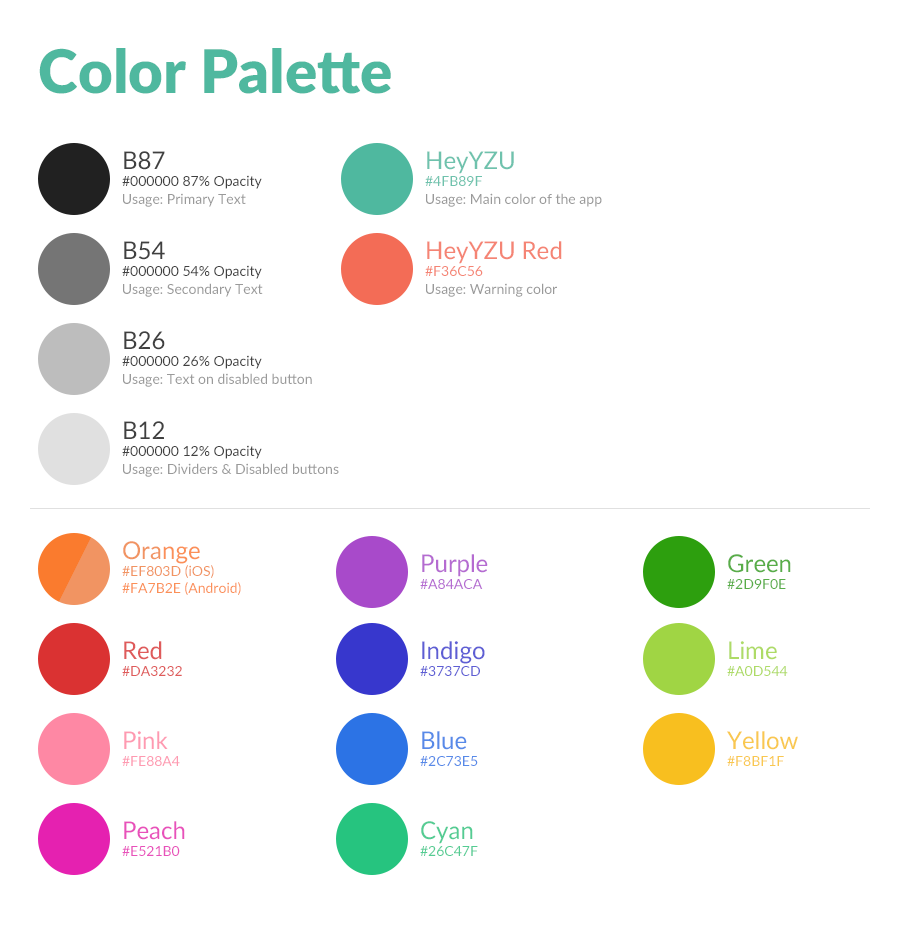
<style>
.page{position:relative;width:900px;height:940px;background:#ffffff}
.page>*{position:absolute;margin:0}
.t1{font:60px "Lato-Black";color:#4fb89f}
.t2{font:14px "Lato-Regular";color:#404040}
.t3{font:24px "Lato-Regular";color:#404040}
.t4{font:14px "Lato-Regular";color:#6fc2ad}
.t5{font:24px "Lato-Regular";color:#6fc2ad}
.t6{font:14px "Lato-Regular";color:#9a9a9a}
.t7{font:24px "Lato-Regular";color:#f58474}
.t8{font:14px "Lato-Regular";color:#f58474}
.t9{font:14px "Lato-Regular";color:#fb9058}
.t10{font:24px "Lato-Regular";color:#fb9058}
.t11{font:14px "Lato-Regular";color:#b56bd1}
.t12{font:24px "Lato-Regular";color:#b56bd1}
.t13{font:14px "Lato-Regular";color:#58ad48}
.t14{font:24px "Lato-Regular";color:#58ad48}
.t15{font:14px "Lato-Regular";color:#df5b5b}
.t16{font:24px "Lato-Regular";color:#df5b5b}
.t17{font:14px "Lato-Regular";color:#5e5ed4}
.t18{font:24px "Lato-Regular";color:#5e5ed4}
.t19{font:14px "Lato-Regular";color:#aedb67}
.t20{font:24px "Lato-Regular";color:#aedb67}
.t21{font:14px "Lato-Regular";color:#fe88a4}
.t22{font:24px "Lato-Regular";color:#fe88a4}
.t23{font:14px "Lato-Regular";color:#578ae8}
.t24{font:24px "Lato-Regular";color:#578ae8}
.t25{font:14px "Lato-Regular";color:#f9c850}
.t26{font:24px "Lato-Regular";color:#f9c850}
.t27{font:14px "Lato-Regular";color:#e851bb}
.t28{font:24px "Lato-Regular";color:#e851bb}
.t29{font:14px "Lato-Regular";color:#54cc93}
.t30{font:24px "Lato-Regular";color:#54cc93}
</style>
<div class="page">
<p class="t1" style="left:39px;top:48px;width:352px;height:46px">Color Palette</p>
<p class="t2" style="left:122px;top:151px;width:140px;height:38px"><span class="t3">B87<br></span>#000000 87% Opacity</p>
<p class="t4" style="left:425px;top:151px;width:89px;height:35px"><span class="t5">HeyYZU<br></span>#4FB89F</p>
<p class="t6" style="left:123px;top:193px;width:123px;height:14px">Usage: Primary Text</p>
<p class="t6" style="left:426px;top:193px;width:176px;height:14px">Usage: Main color of the app</p>
<p class="t2" style="left:122px;top:241px;width:140px;height:38px"><span class="t3">B54<br></span>#000000 54% Opacity</p>
<p class="t7" style="left:425px;top:241px;width:137px;height:35px">HeyYZU Red<br><span class="t8">#F36C56</span></p>
<p class="t6" style="left:123px;top:283px;width:140px;height:14px">Usage: Secondary Text</p>
<p class="t6" style="left:426px;top:283px;width:131px;height:14px">Usage: Warning color</p>
<p class="t2" style="left:122px;top:331px;width:140px;height:38px"><span class="t3">B26<br></span>#000000 26% Opacity</p>
<p class="t6" style="left:123px;top:373px;width:189px;height:14px">Usage: Text on disabled button</p>
<p class="t2" style="left:122px;top:421px;width:140px;height:38px"><span class="t3">B12<br></span>#000000 12% Opacity</p>
<p class="t6" style="left:123px;top:463px;width:216px;height:14px">Usage: Dividers &amp; Disabled buttons</p>
<p class="t9" style="left:122px;top:541px;width:119px;height:54px"><span class="t10">Ora</span><span class="t10">nge<br></span>#EF803D (iOS)<br>#FA7B2E (Android)</p>
<p class="t11" style="left:420px;top:554px;width:68px;height:35px"><span class="t12">Purple<br></span>#A84ACA</p>
<p class="t13" style="left:727px;top:554px;width:64px;height:35px"><span class="t14">Green<br></span>#2D9F0E</p>
<p class="t15" style="left:122px;top:641px;width:60px;height:35px"><span class="t16">Red<br></span>#DA3232</p>
<p class="t17" style="left:420px;top:641px;width:65px;height:35px"><span class="t18">Indigo<br></span>#3737CD</p>
<p class="t19" style="left:727px;top:641px;width:61px;height:35px"><span class="t20">Lime<br></span>#A0D544</p>
<p class="t21" style="left:122px;top:731px;width:58px;height:35px;opacity:0.87"><span class="t22">Pink<br></span>#FE88A4</p>
<p class="t23" style="left:420px;top:731px;width:58px;height:35px"><span class="t24">Blue<br></span>#2C73E5</p>
<p class="t25" style="left:727px;top:731px;width:71px;height:35px"><span class="t26">Yellow<br></span>#F8BF1F</p>
<p class="t27" style="left:122px;top:821px;width:63px;height:35px"><span class="t28">Peach<br></span>#E521B0</p>
<p class="t29" style="left:420px;top:821px;width:58px;height:35px"><span class="t30">Cyan<br></span>#26C47F</p>
</div>
